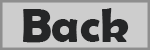
<style>
.page{position:relative;width:150px;height:50px;background:#cdcdcd}
.page>*{position:absolute;margin:0}
.t1{font:48px "BerlinSansFBDemi-Bold";color:#252627}
</style>
<div class="page">
<p class="t1" style="left:23px;top:8px;width:106px;height:35px">Back</p>
</div>
